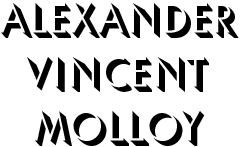
<style>
.page{position:relative;width:240px;height:147px;background:#ffffff}
.page>*{position:absolute;margin:0}
.t1{font:45px "UmbraStd";color:#000000}
</style>
<div class="page">
<p class="t1" style="left:1px;top:3px;width:238px;height:143px;text-align:center">Alexander<br>Vincent<br>Molloy</p>
</div>
